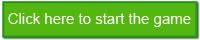
<style>
.page{position:relative;width:200px;height:40px;background:#53b710}
.page>*{position:absolute;margin:0}
.t1{font:15px "ArialMT";color:#ffffff}
</style>
<div class="page">
<p class="t1" style="left:8px;top:13px;width:183px;height:14px">Click here to start the game</p>
</div>
